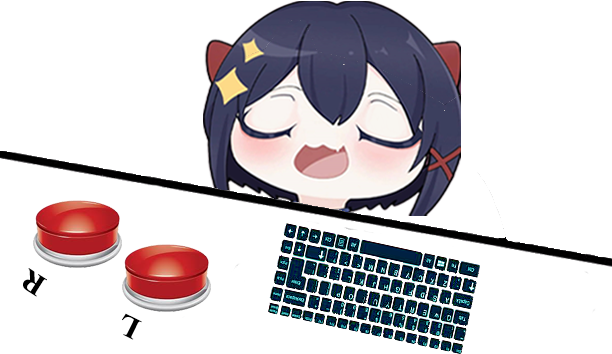
<style>
.page{position:relative;width:612px;height:354px;background:#ffffff}
.page>*{position:absolute;margin:0}
.t1{font:30px "TimesNewRomanPS-BoldMT";color:#000000}
</style>
<div class="page">
<p class="t1" style="left:23px;top:268px;width:24px;height:29px;rotate:-148deg">R</p>
<p class="t1" style="left:122px;top:313px;width:20px;height:27px;rotate:-154deg">L</p>
</div>
